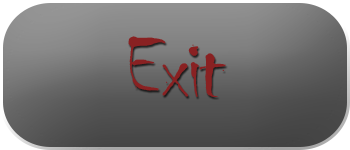
<style>
.page{position:relative;width:350px;height:150px}
.page>*{position:absolute;margin:0}
.t1{font:89.9px "Chiller-Regular";letter-spacing:-0.025em;color:#892122}
</style>
<div class="page">
<p class="t1" style="left:128px;top:36px;width:98px;height:61px">Exit</p>
</div>
